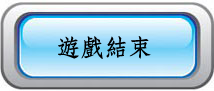
<style>
.page{position:relative;width:214px;height:91px}
.page>*{position:absolute;margin:0}
.t1{font:24px "DFFangSongStd-W6";color:#000000}
</style>
<div class="page">
<p class="t1" style="left:58px;top:36px;width:93px;height:23px">遊戲結束</p>
</div>
